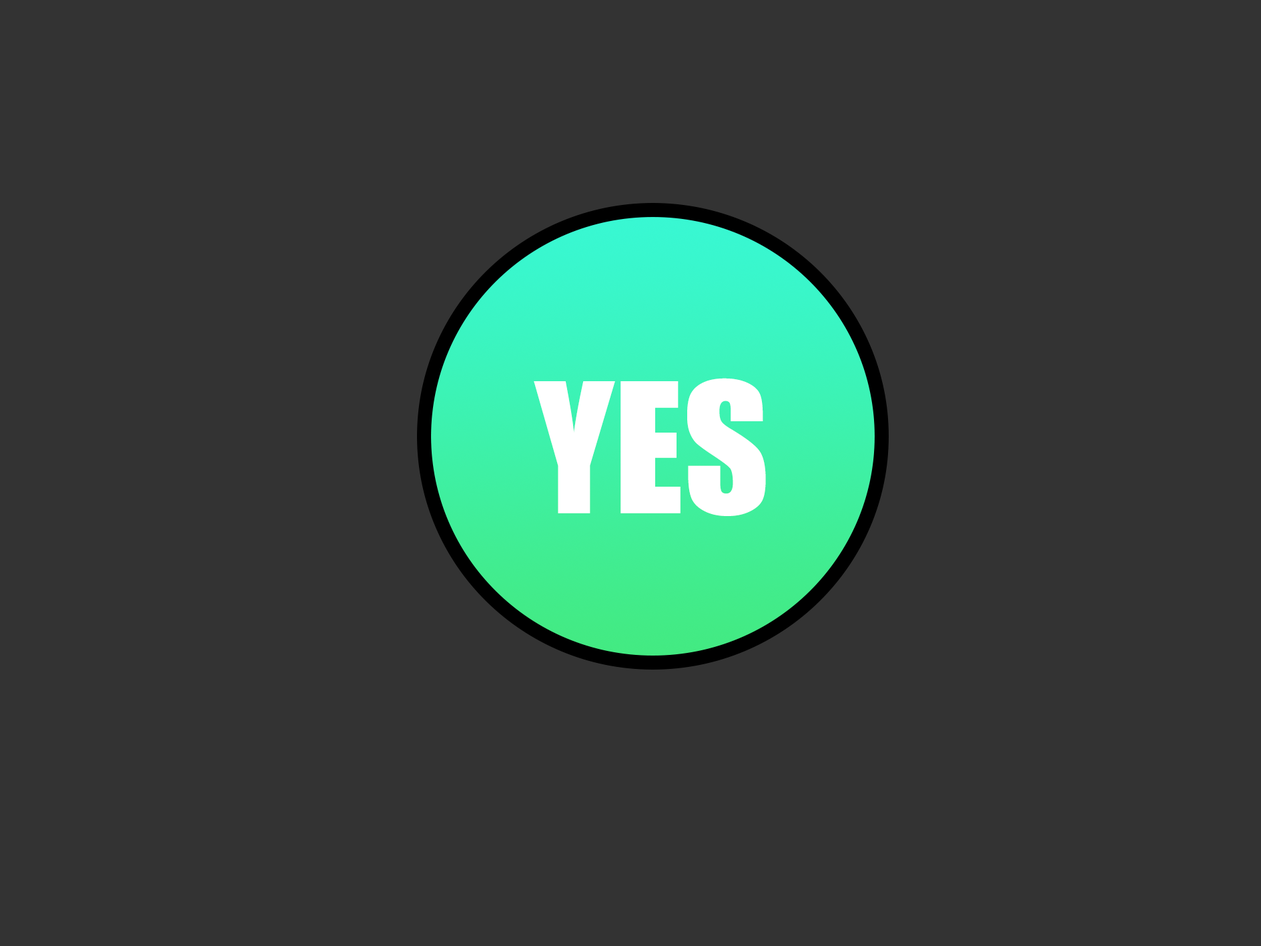
<style>
.page{position:relative;width:1261px;height:946px;background:#333333}
.page>*{position:absolute;margin:0}
.t1{font:166.8px "Impact";color:#ffffff}
</style>
<div class="page">
<p class="t1" style="left:534px;top:378px;width:232px;height:138px">YES</p>
</div>
